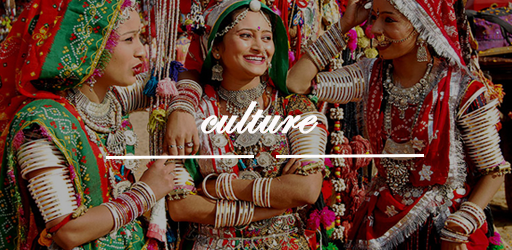
<style>
.page{position:relative;width:512px;height:250px}
.page>*{position:absolute;margin:0}
.t1{font:60px "EdwardianScriptITC";color:#fbf9f9;font-weight:bold}
</style>
<div class="page">
<p class="t1" style="left:201px;top:101px;width:117px;height:33px">culture</p>
</div>
